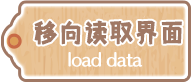
<style>
.page{position:relative;width:191px;height:82px}
.page>*{position:absolute;margin:0}
.t1{font:26.1px "shetumodengxiaofangti";color:#a07864;font-weight:bold;scale:0.94 1}
</style>
<div class="page">
<p class="t1" style="left:34px;top:20px;width:148px;height:25px">移向读取界面</p>
</div>
